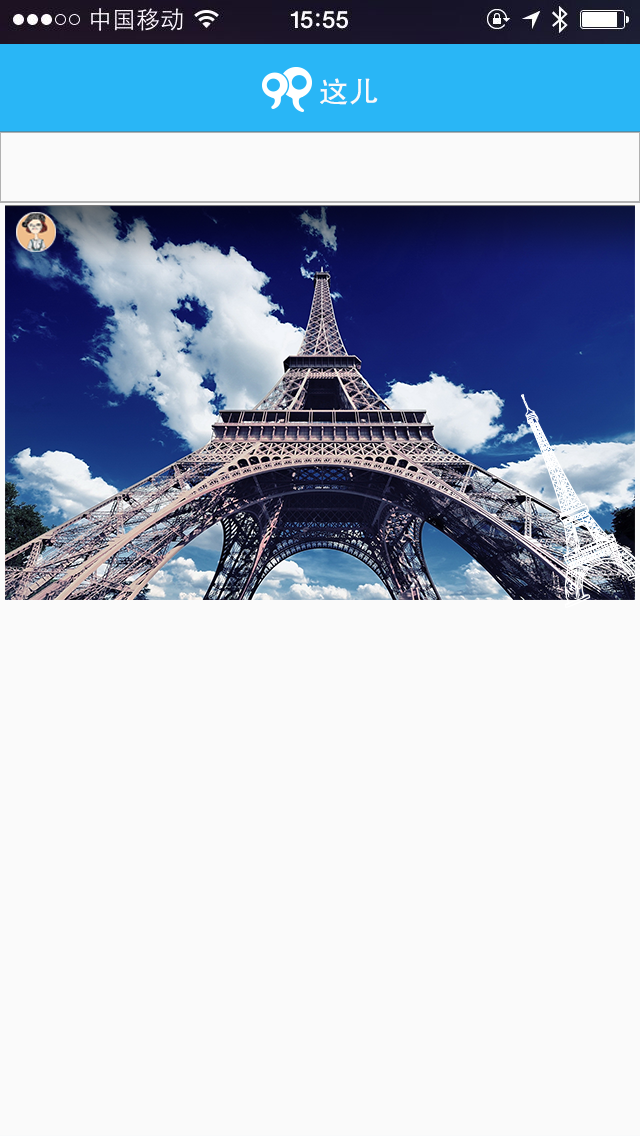
<style>
.page{position:relative;width:640px;height:1136px;background:#fafafa}
.page>*{position:absolute;margin:0}
.t1{font:30px "FZHTJW--GB1-0";color:#fafafa}
</style>
<div class="page">
<p class="t1" style="left:320px;top:78px;width:58px;height:27px">这儿</p>
</div>
